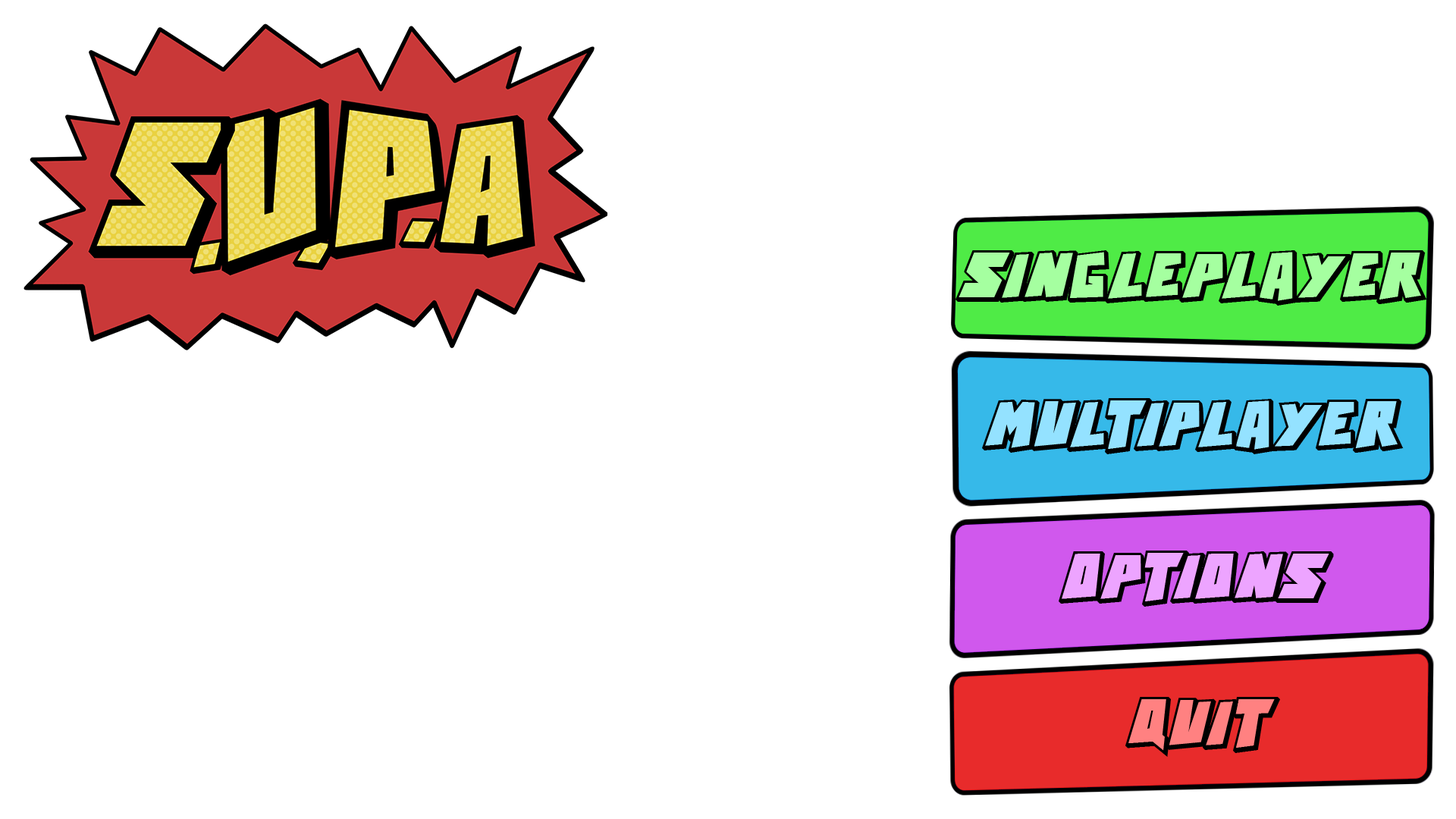
<style>
.page{position:relative;width:1456px;height:819px;background:#ffffff}
.page>*{position:absolute;margin:0}
.t1{font:31.6px "ActionComics";color:#000000}
</style>
<div class="page">
<p class="t1" style="left:955px;top:250px;width:472px;height:56px">SINGLEPLAYER</p>
<p class="t1" style="left:982px;top:398px;width:422px;height:56px">MULTIPLAYER</p>
<p class="t1" style="left:1059px;top:551px;width:275px;height:56px">OPTIONS</p>
<p class="t1" style="left:1125px;top:697px;width:155px;height:60px">QUIT</p>
</div>
